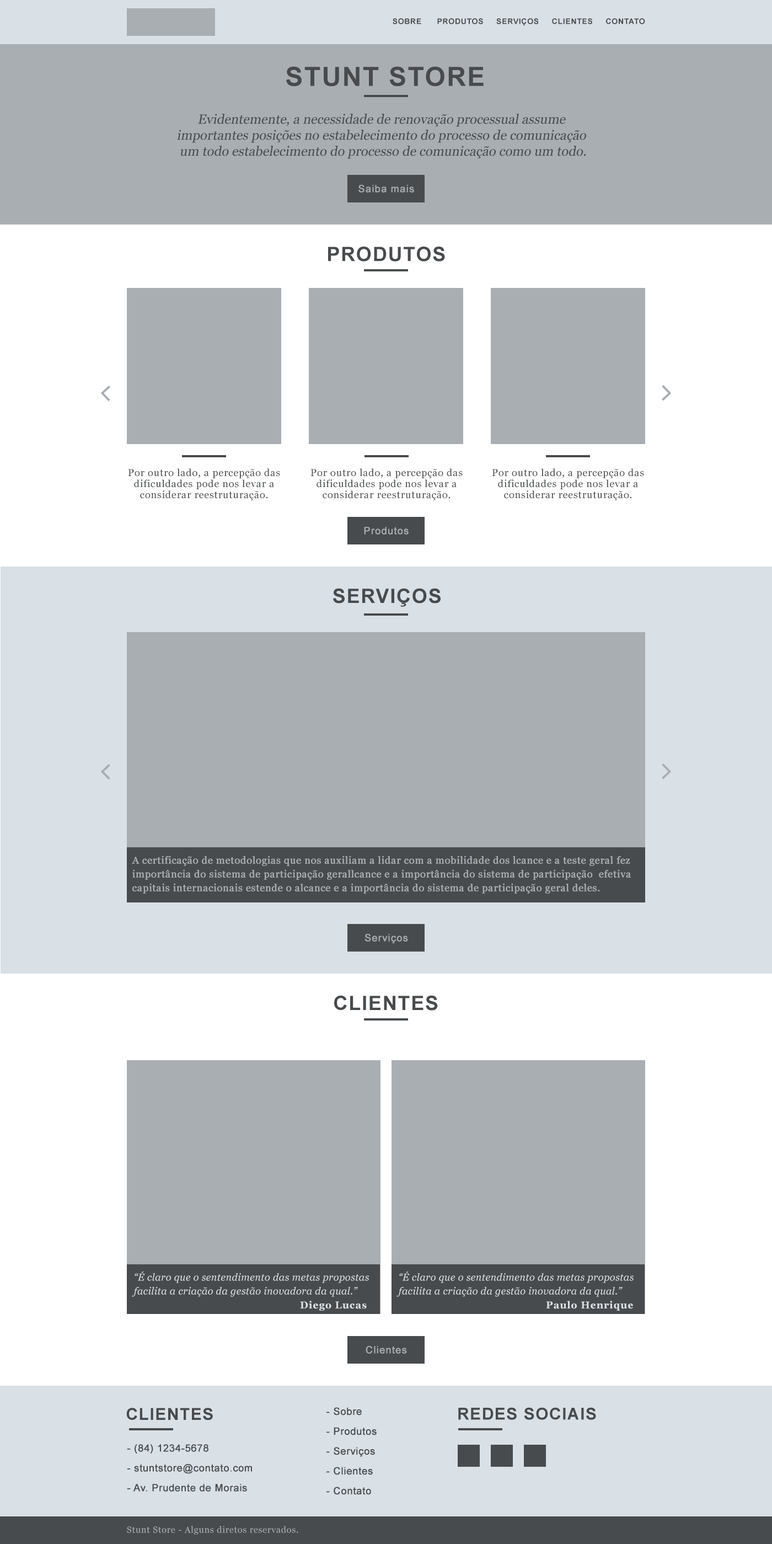
<style>
.page{position:relative;width:772px;height:1544px;background:#a9aeb3}
.page>*{position:absolute;margin:0}
.t1{font:7.7px "Arial-BoldMT";letter-spacing:0.05em;color:#484b4d;text-transform:uppercase}
.t2{font:26.5px "Arial-BoldMT";letter-spacing:0.05em;color:#484b4d;text-transform:uppercase}
.t3{font:13.2px/16px "Georgia";color:#484b4d;font-style:italic}
.t4{font:9.9px "ArialMT";letter-spacing:0.05em;color:#a9aeb3;font-weight:bold}
.t5{font:19.9px "Arial-BoldMT";letter-spacing:0.05em;color:#484b4d;text-transform:uppercase}
.t6{font:9.9px/11px "Georgia";letter-spacing:0.05em;color:#484b4d}
.t7{font:9.9px/13.8px "Georgia";letter-spacing:0.025em;color:#a9aeb3;font-weight:bold}
.t8{font:9.9px/13.8px "Georgia-Italic";letter-spacing:0.025em;color:#d9e0e6}
.t9{font:9.9px "Georgia-Bold";letter-spacing:0.05em;color:#d9e0e6}
.t10{font:16.5px "Arial-BoldMT";letter-spacing:0.05em;color:#484b4d;text-transform:uppercase}
.t11{font:9.9px/19.9px "ArialMT";letter-spacing:0.025em;color:#484b4d;font-weight:bold}
.t12{font:8.8px "Georgia";letter-spacing:0.05em;color:#a9aeb3}
</style>
<div class="page">
<p class="t1" style="left:393px;top:18px;width:252px;height:7px">Sobre      produtos     serviços     Clientes     contato</p>
<p class="t2" style="left:286px;top:66px;width:198px;height:21px">Stunt Store</p>
<p class="t3" style="left:177px;top:114px;width:409px;height:45px;text-align:center">Evidentemente, a necessidade de renovação processual assume <br>importantes posições no estabelecimento do processo de comunicação <br>um todo estabelecimento do processo de comunicação como um todo.</p>
<p class="t4" style="left:359px;top:185px;width:55px;height:8px">Saiba mais</p>
<p class="t5" style="left:328px;top:247px;width:117px;height:14px">Produtos</p>
<p class="t6" style="left:128px;top:468px;width:152px;height:32px;text-align:center">Por outro lado, a percepção das<br>dificuldades pode nos levar a<br>considerar reestruturação.</p>
<p class="t6" style="left:311px;top:468px;width:152px;height:32px;text-align:center">Por outro lado, a percepção das<br>dificuldades pode nos levar a<br>considerar reestruturação.</p>
<p class="t6" style="left:492px;top:468px;width:152px;height:32px;text-align:center">Por outro lado, a percepção das<br>dificuldades pode nos levar a<br>considerar reestruturação.</p>
<p class="t4" style="left:364px;top:527px;width:45px;height:8px">Produtos</p>
<p class="t5" style="left:333px;top:588px;width:108px;height:19px">Serviços</p>
<p class="t7" style="left:132px;top:856px;width:499px;height:38px">A certificação de metodologias que nos auxiliam a lidar com a mobilidade dos lcance e a teste geral fez <br>importância do sistema de participação gerallcance e a importância do sistema de participação  efetiva<br>capitais internacionais estende o alcance e a importância do sistema de participação geral deles.</p>
<p class="t4" style="left:365px;top:934px;width:43px;height:9px">Serviços</p>
<p class="t5" style="left:334px;top:995px;width:104px;height:16px">Clientes</p>
<p class="t8" style="left:132px;top:1272px;width:237px;height:25px">“É claro que o sentendimento das metas propostas <br>facilita a criação da gestão inovadora da qual.”</p>
<p class="t8" style="left:397px;top:1272px;width:237px;height:25px">“É claro que o sentendimento das metas propostas <br>facilita a criação da gestão inovadora da qual.”</p>
<p class="t9" style="left:300px;top:1301px;width:67px;height:10px">Diego Lucas</p>
<p class="t9" style="left:546px;top:1301px;width:87px;height:10px">Paulo Henrique</p>
<p class="t4" style="left:366px;top:1346px;width:41px;height:8px">Clientes</p>
<p class="t10" style="left:126px;top:1408px;width:87px;height:12px">Clientes</p>
<p class="t11" style="left:327px;top:1407px;width:50px;height:88px">- Sobre<br>- Produtos<br>- Serviços<br>- Clientes<br>- Contato</p>
<p class="t10" style="left:458px;top:1407px;width:138px;height:13px">Redes Sociais</p>
<p class="t11" style="left:127px;top:1444px;width:125px;height:48px">- (84) 1234-5678<br>- stuntstore@contato.com<br>- Av. Prudente de Morais</p>
<p class="t12" style="left:127px;top:1526px;width:171px;height:9px">Stunt Store - Alguns diretos reservados.</p>
</div>
